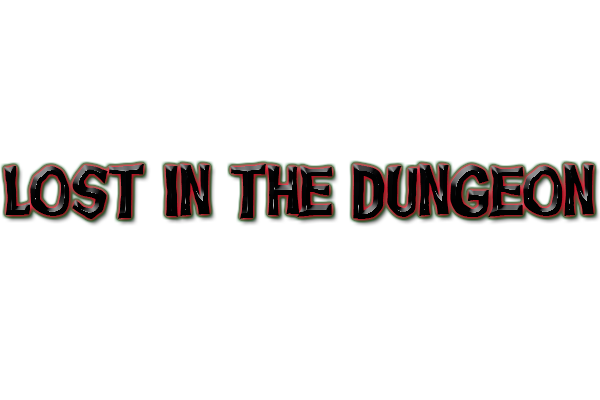
<style>
.page{position:relative;width:600px;height:400px;background:#ffffff}
.page>*{position:absolute;margin:0}
.t1{font:80px "GhoulishFrightAOE";color:#050505}
</style>
<div class="page">
<p class="t1" style="left:4px;top:164px;width:590px;height:55px">LOST IN THE DUNGEON</p>
</div>
